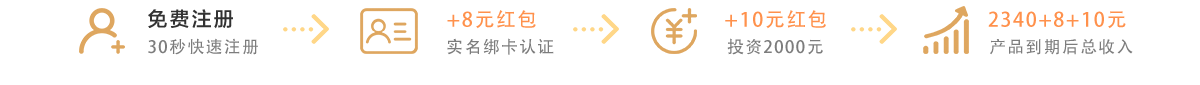
<style>
.page{position:relative;width:1200px;height:85px;background:#ffffff}
.page>*{position:absolute;margin:0}
.t1{font:19.8px "AdobeHeitiStd-Regular";letter-spacing:0.08em;color:#ff914c;text-transform:uppercase}
.t2{font:16.9px "AdobeHeitiStd-Regular";letter-spacing:0.08em;color:#7d7d7d;text-transform:uppercase}
</style>
<div class="page">
<p class="t1" style="left:447px;top:10px;width:89px;height:19px">+8元红包</p>
<p class="t1" style="left:725px;top:10px;width:101px;height:19px">+10元红包</p>
<p class="t1" style="left:988px;top:11px;width:138px;height:18px">2340+8+10元</p>
<p class="t2" style="left:148px;top:38px;width:110px;height:17px">30秒快速注册</p>
<p class="t2" style="left:447px;top:38px;width:107px;height:17px">实名绑卡认证</p>
<p class="t2" style="left:727px;top:38px;width:96px;height:17px">投资2000元</p>
<p class="t2" style="left:990px;top:38px;width:143px;height:17px">产品到期后总收入</p>
</div>
